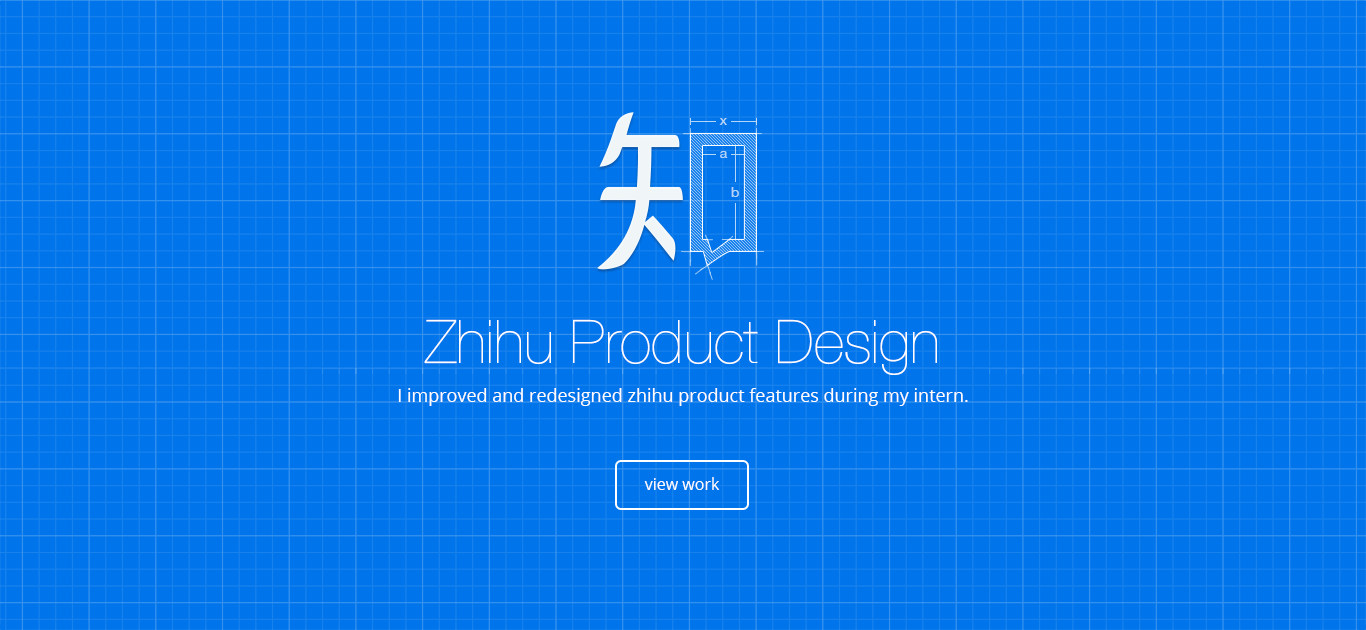
<style>
.page{position:relative;width:1366px;height:630px;background:#0074ea}
.page>*{position:absolute;margin:0}
.t1{font:14px "HelveticaNeue";color:#b3d6f9}
.t2{font:60px "HelveticaNeueLTPro-UltLt";color:#ffffff}
.t3{font:18px "OpenSans";color:#ffffff}
.t4{font:16px "OpenSans";color:#ffffff}
</style>
<div class="page">
<p class="t1" style="left:719px;top:118px;width:8px;height:7px">x</p>
<p class="t1" style="left:720px;top:151px;width:8px;height:7px">a</p>
<p class="t1" style="left:731px;top:187px;width:8px;height:10px">b</p>
<p class="t2" style="left:424px;top:319px;width:513px;height:56px">Zhihu Product Design</p>
<p class="t3" style="left:398px;top:388px;width:570px;height:18px">I improved and redesigned zhihu product features during my intern.</p>
<p class="t4" style="left:644px;top:477px;width:76px;height:13px">view work</p>
</div>
